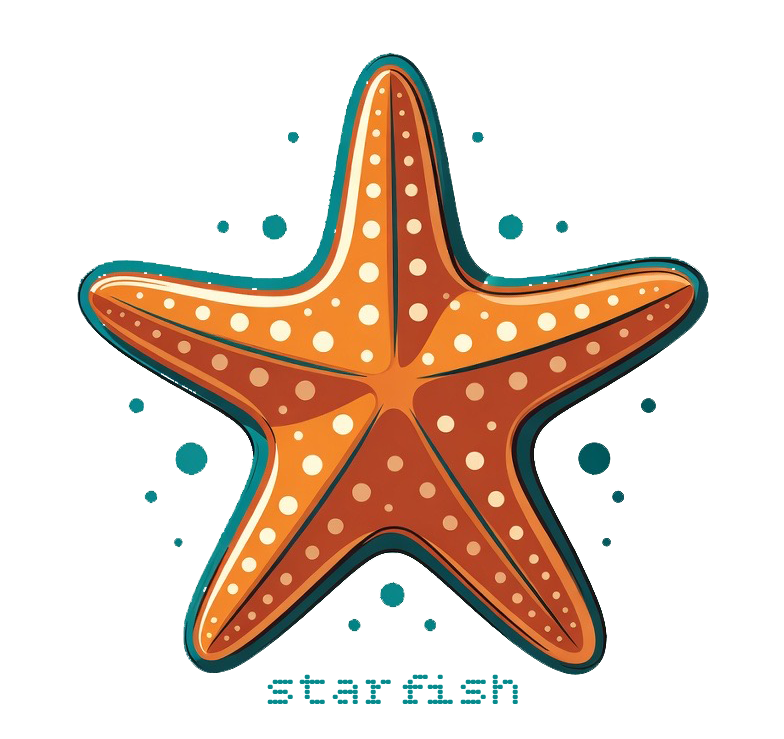
<style>
.page{position:relative;width:784px;height:739px;background:#ffffff}
.page>*{position:absolute;margin:0}
.t1{font:50px "BitcountGridSingle-BookCircle";letter-spacing:0.025em;color:#068c8d;font-weight:bold}
</style>
<div class="page">
<p class="t1" style="left:267px;top:674px;width:251px;height:30px">starfish</p>
</div>
